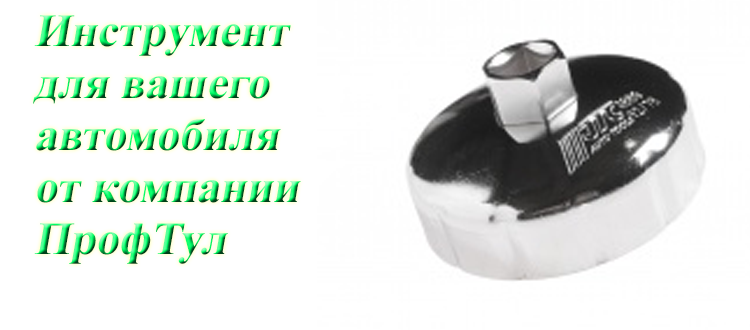
<style>
.page{position:relative;width:750px;height:330px;background:#ffffff}
.page>*{position:absolute;margin:0}
.t1{font:46px/52px "TimesNewRomanPS-BoldMT";font-style:italic}
</style>
<div class="page">
<p class="t1" style="left:33px;top:15px;width:268px;height:249px;text-align:justify">Инструмент <br>для вашего<br>автомобиля<br>от компании<br>ПрофТул</p>
</div>
